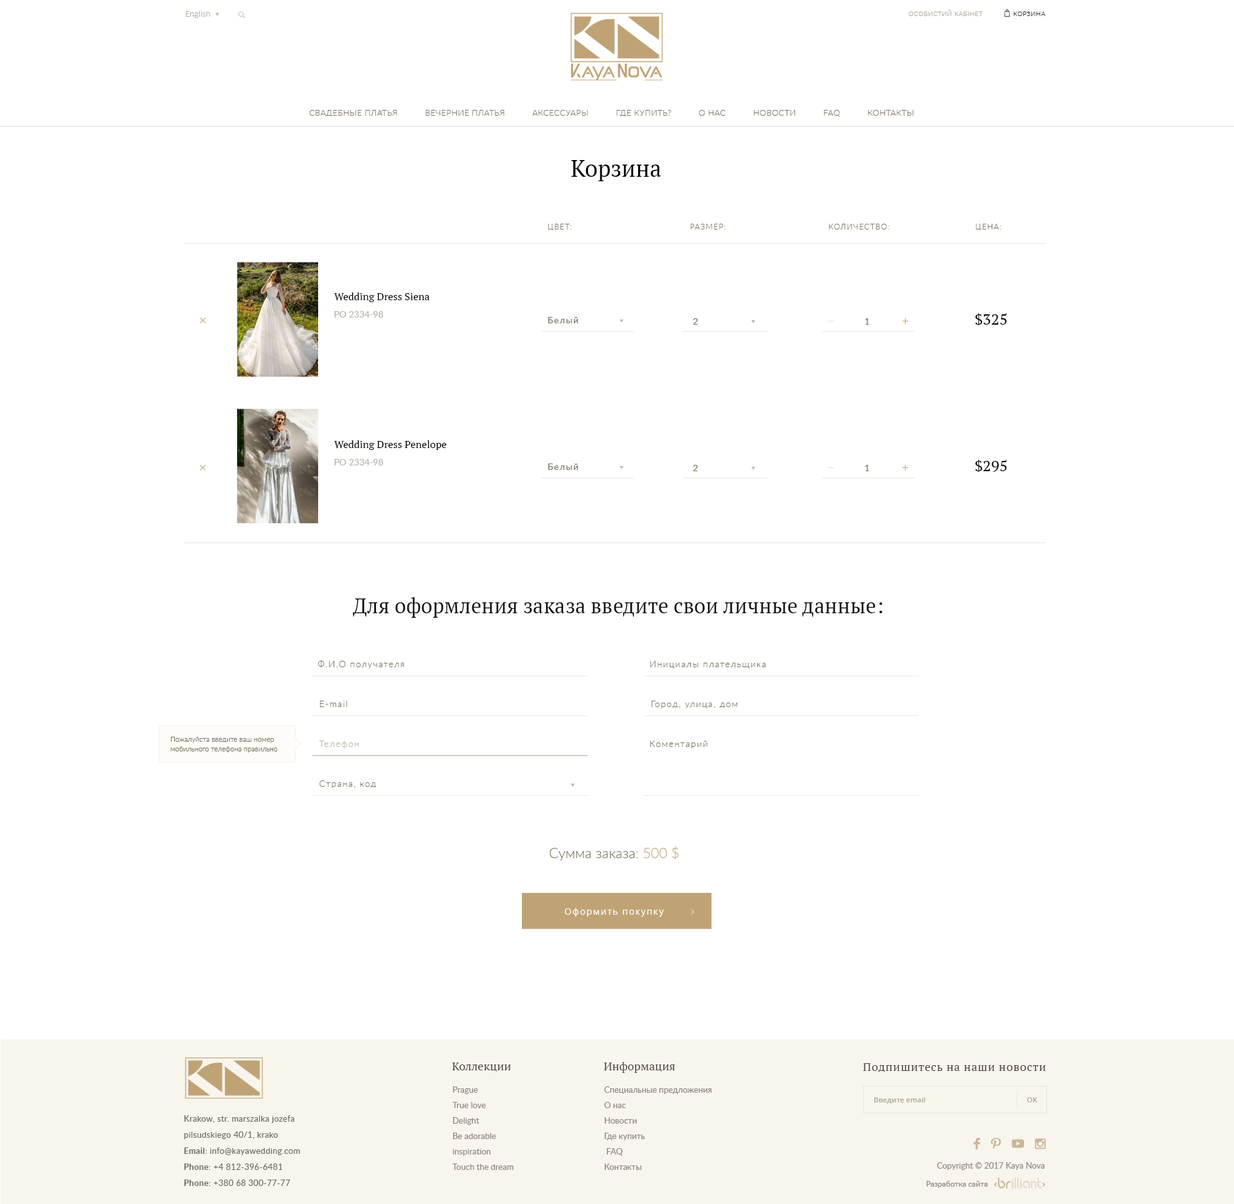
<style>
.page{position:relative;width:1234px;height:1204px;background:#ffffff}
.page>*{position:absolute;margin:0}
.t1{font:8.4px "Lato-Light";color:#aea993}
.t2{font:6.4px "Lato-Light";letter-spacing:0.05em;color:#aea993;text-transform:uppercase}
.t3{font:6.4px "Lato-Light";letter-spacing:0.05em;color:#272624;text-transform:uppercase}
.t4{font:8.4px "Lato-Light";letter-spacing:0.025em;color:#7b7460;text-transform:uppercase}
.t5{font:23.1px "PTSerif-Regular";color:#010101}
.t6{font:7.7px "Lato-Light";letter-spacing:0.1em;color:#7b7460;text-transform:uppercase}
.t7{font:10.3px "PTSerif-Regular";color:#010101}
.t8{font:9px "Lato-Regular";color:#b7b4ab;text-transform:uppercase}
.t9{font:9px "Lato-Regular";letter-spacing:0.1em;color:#7b7460}
.t10{font:15.4px "PTSerif-Regular";color:#000000}
.t11{font:9px "Lato-Regular";letter-spacing:0.1em;color:#7b7460;text-transform:uppercase}
.t12{font:20.6px "PTSerif-Regular";color:#121110}
.t13{font:9px "Lato-Light";letter-spacing:0.1em;color:#7b7460}
.t14{font:9px "Lato-Light";letter-spacing:0.1em;color:#7b7460;text-transform:uppercase}
.t15{font:7.1px/10.1px "Lato-Light";color:#7b7460}
.t16{font:9px "Lato-Light";letter-spacing:0.1em;color:#bbb5a6}
.t17{font:14.1px "Lato-Light";color:#7b7460}
.t18{font:14.1px "Lato-Light";color:#c0a375}
.t19{font:9px "OpenSans";letter-spacing:0.1em;color:#ffffff}
.t20{font:11.6px "PTSerif-Regular";color:#4e4942}
.t21{font:11.6px "PTSerif-Regular";letter-spacing:0.045em;color:#4e4942}
.t22{font:8.4px/15.4px "Lato-Regular";color:#8d8881}
.t23{font:7.1px "OpenSans-Semibold";color:#afaf9a}
.t24{font:8.4px/16.1px "Lato-Regular";letter-spacing:0.025em;color:#6c6964}
.t25{font:8.4px/16.1px "Lato-Bold";letter-spacing:0.025em;color:#6c6964}
.t26{font:8.4px "Lato-Regular";color:#8d8881}
.t27{font:7.7px "Lato-Regular";color:#8d8881}
</style>
<div class="page">
<p class="t1" style="left:186px;top:10px;width:24px;height:8px">English</p>
<p class="t2" style="left:909px;top:10px;width:74px;height:6px">Особистий кабінет</p>
<p class="t3" style="left:1014px;top:12px;width:32px;height:4px">корзина</p>
<p class="t4" style="left:309px;top:110px;width:605px;height:7px">Свадебные платья           Вечерние платья           Аксессуары           Где купить?           О нас           Новости           FAQ           Контакты</p>
<p class="t5" style="left:572px;top:160px;width:90px;height:21px">Корзина</p>
<p class="t6" style="left:548px;top:224px;width:24px;height:6px">Цвет:</p>
<p class="t6" style="left:690px;top:224px;width:36px;height:6px">Размер:</p>
<p class="t6" style="left:829px;top:224px;width:61px;height:6px">Количество:</p>
<p class="t6" style="left:976px;top:224px;width:26px;height:6px">Цена:</p>
<p class="t7" style="left:334px;top:293px;width:96px;height:9px">Wedding Dress Siena</p>
<p class="t8" style="left:334px;top:311px;width:50px;height:7px">РО 2334-98</p>
<p class="t9" style="left:548px;top:317px;width:31px;height:6px">Белый</p>
<p class="t10" style="left:975px;top:313px;width:32px;height:12px">$325</p>
<p class="t11" style="left:693px;top:318px;width:5px;height:7px">2</p>
<p class="t11" style="left:865px;top:318px;width:5px;height:7px">1</p>
<p class="t7" style="left:334px;top:440px;width:113px;height:10px">Wedding Dress Penelope</p>
<p class="t8" style="left:334px;top:459px;width:50px;height:6px">РО 2334-98</p>
<p class="t10" style="left:975px;top:460px;width:32px;height:12px">$295</p>
<p class="t9" style="left:548px;top:464px;width:31px;height:6px">Белый</p>
<p class="t11" style="left:693px;top:465px;width:5px;height:6px">2</p>
<p class="t11" style="left:865px;top:465px;width:5px;height:6px">1</p>
<p class="t12" style="left:353px;top:597px;width:530px;height:21px">Для оформления заказа введите свои личные данные:</p>
<p class="t13" style="left:318px;top:660px;width:86px;height:9px"><span class="t14">Ф.и.о</span> получателя</p>
<p class="t13" style="left:650px;top:661px;width:116px;height:8px">Инициалы плательщика</p>
<p class="t13" style="left:320px;top:701px;width:27px;height:6px">E-mail</p>
<p class="t13" style="left:651px;top:701px;width:87px;height:7px">Город, улица, дом</p>
<p class="t15" style="left:170px;top:737px;width:108px;height:16px">Пожалуйста введите ваш номер<br>мобильного телефона правильно</p>
<p class="t16" style="left:319px;top:741px;width:40px;height:8px">Телефон</p>
<p class="t13" style="left:650px;top:741px;width:58px;height:7px">Коментарий</p>
<p class="t13" style="left:320px;top:780px;width:56px;height:8px">Страна, код</p>
<p class="t17" style="left:550px;top:846px;width:129px;height:15px">Сумма заказа: <span class="t18">500 $</span></p>
<p class="t19" style="left:565px;top:908px;width:99px;height:9px">Оформить покупку</p>
<p class="t20" style="left:452px;top:1063px;width:59px;height:9px">Коллекции</p>
<p class="t20" style="left:604px;top:1062px;width:72px;height:11px">Информация</p>
<p class="t21" style="left:863px;top:1063px;width:183px;height:9px">Подпишитесь на наши новости</p>
<p class="t22" style="left:453px;top:1086px;width:61px;height:84px">Prague<br>True love<br>Delight<br>Be adorable<br>inspiration<br>Touch the dream</p>
<p class="t22" style="left:604px;top:1086px;width:108px;height:84px">Специальные предложения <br>О нас <br>Новости <br>Где купить<br> FAQ<br>Контакты</p>
<p class="t23" style="left:874px;top:1097px;width:52px;height:7px">Введите email</p>
<p class="t23" style="left:1027px;top:1097px;width:11px;height:6px">OK</p>
<p class="t24" style="left:184px;top:1115px;width:116px;height:71px">Krakow, str. marszalka jozefa<br>pilsudskiego 40/1, krako<br><span class="t25">Email:</span> info@kayawedding.com<br><span class="t25">Phone:</span> +4 812-396-6481<br><span class="t25">Phone:</span> +380 68 300-77-77</p>
<p class="t26" style="left:937px;top:1162px;width:108px;height:8px">Copyright © 2017 Kaya Nova</p>
<p class="t27" style="left:926px;top:1181px;width:62px;height:7px">Разработка сайта</p>
</div>
